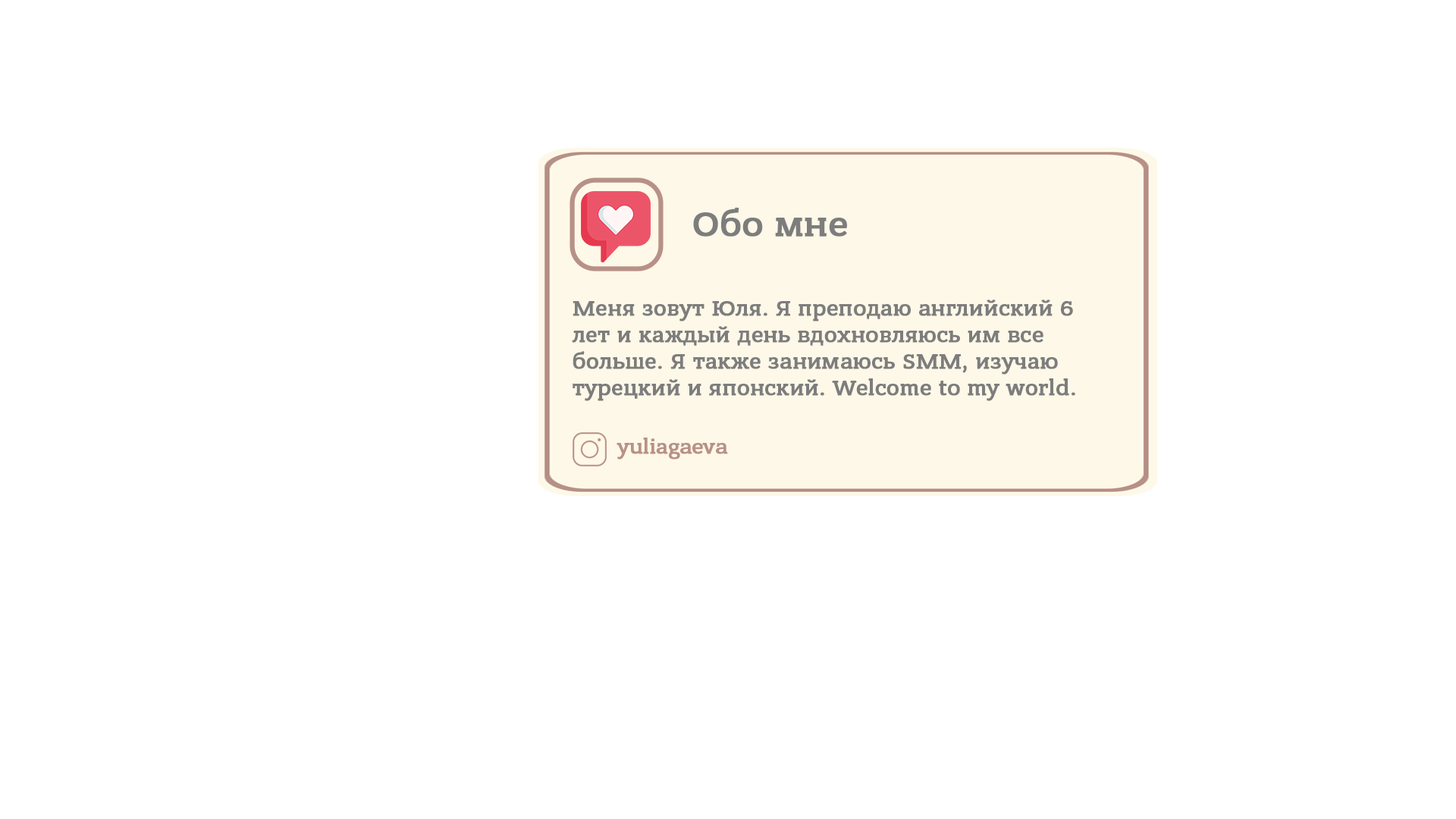
<style>
.page{position:relative;width:1456px;height:819px;background:#ffffff}
.page>*{position:absolute;margin:0}
.t1{font:35.8px "BanderaProMedium";color:#7d7d7d;font-weight:bold}
.t2{font:22.1px "BanderaProMedium";color:#7d7d7d;font-weight:bold}
.t3{font:21.1px "BanderaProMedium";color:#b79187;font-weight:bold}
</style>
<div class="page">
<p class="t1" style="left:693px;top:207px;width:154px;height:30px">Обо мне</p>
<p class="t2" style="left:572px;top:300px;width:503px;height:101px">Меня зовут Юля. Я преподаю английский 6 лет и каждый день вдохновляюсь им все больше. Я также занимаюсь SMM, изучаю турецкий и японский. Welcome to my world.</p>
<p class="t3" style="left:617px;top:438px;width:111px;height:22px">yuliagaeva</p>
</div>
